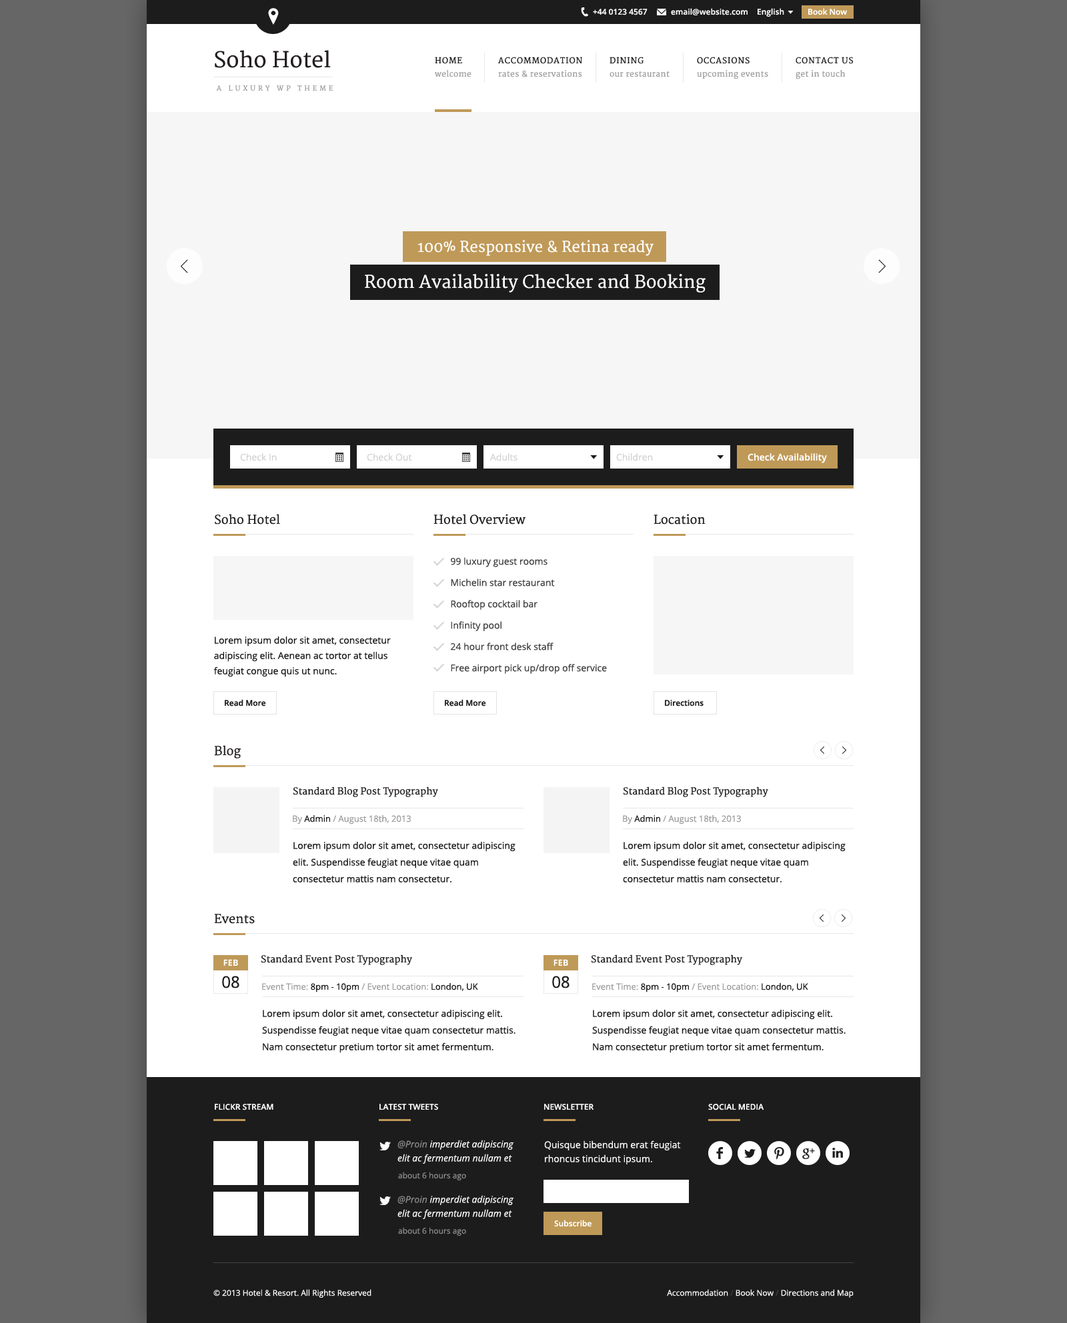
<style>
.page{position:relative;width:1067px;height:1323px;background:#ffffff}
.page>*{position:absolute;margin:0}
.t1{font:8px "OpenSans-Semibold";color:#ffffff}
.t2{font:21.3px "Merriweather";color:#231f20}
.t3{font:8px "Merriweather";letter-spacing:0.075em;color:#1c1c1c;text-transform:uppercase}
.t4{font:8px "Merriweather";letter-spacing:0.025em;color:#a09d9d}
.t5{font:6.7px "Merriweather";letter-spacing:0.4em;color:#a09d9d;text-transform:uppercase}
.t6{font:14.7px "Merriweather";color:#ffffff}
.t7{font:17.3px "Merriweather";color:#ffffff}
.t8{font:9.3px "OpenSans";color:#d3d3d3}
.t9{font:9.3px "OpenSans-Semibold";color:#ffffff}
.t10{font:12px "Merriweather";color:#231f20}
.t11{font:9.3px "OpenSans";color:#424242}
.t12{font:9.3px/15.3px "OpenSans";color:#1c1c1c}
.t13{font:8px "OpenSans-Semibold";color:#1c1c1c}
.t14{font:9.3px "Merriweather";color:#231f20}
.t15{font:8.7px "OpenSans";color:#a09d9d}
.t16{font:8.7px "OpenSans";color:#1c1c1c}
.t17{font:9.3px/16.7px "OpenSans";color:#1c1c1c}
.t18{font:8.7px "OpenSans-Bold";color:#ffffff;text-transform:uppercase}
.t19{font:16px "OpenSans";color:#1c1c1c}
.t20{font:8px "OpenSans-Semibold";color:#ffffff;text-transform:uppercase}
.t21{font:9.3px/14px "OpenSans-Italic";color:#ffffff}
.t22{font:9.3px/14px "OpenSans-Italic";color:#8b8b8b}
.t23{font:9.3px/14px "OpenSans";color:#ffffff}
.t24{font:8px "OpenSans";color:#8b8b8b}
.t25{font:8px "OpenSans";color:#ffffff}
.t26{font:8px "OpenSans";color:#424242}
</style>
<div class="page">
<p class="t1" style="left:593px;top:9px;width:54px;height:6px">+44 0123 4567</p>
<p class="t1" style="left:671px;top:8px;width:76px;height:7px">email@website.com</p>
<p class="t1" style="left:757px;top:8px;width:27px;height:9px">English</p>
<p class="t1" style="left:808px;top:8px;width:39px;height:7px">Book Now</p>
<p class="t2" style="left:215px;top:50px;width:116px;height:18px">Soho Hotel</p>
<p class="t3" style="left:435px;top:57px;width:27px;height:7px">Home</p>
<p class="t3" style="left:498px;top:57px;width:84px;height:7px">Accommodation</p>
<p class="t3" style="left:609px;top:57px;width:34px;height:7px">Dining</p>
<p class="t3" style="left:697px;top:57px;width:52px;height:7px">Occasions</p>
<p class="t3" style="left:795px;top:57px;width:58px;height:7px">Contact Us</p>
<p class="t4" style="left:435px;top:70px;width:36px;height:7px">welcome</p>
<p class="t4" style="left:498px;top:70px;width:84px;height:7px">rates &amp; reservations</p>
<p class="t4" style="left:609px;top:71px;width:60px;height:6px">our restaurant</p>
<p class="t4" style="left:697px;top:70px;width:71px;height:9px">upcoming events</p>
<p class="t4" style="left:795px;top:70px;width:50px;height:9px">get in touch</p>
<p class="t5" style="left:216px;top:85px;width:117px;height:6px">A Luxury WP Theme</p>
<p class="t6" style="left:418px;top:240px;width:235px;height:16px">100% Responsive &amp; Retina ready</p>
<p class="t7" style="left:365px;top:274px;width:340px;height:19px">Room Availability Checker and Booking</p>
<p class="t8" style="left:240px;top:453px;width:37px;height:8px">Check In</p>
<p class="t8" style="left:367px;top:453px;width:45px;height:8px">Check Out</p>
<p class="t8" style="left:489px;top:453px;width:28px;height:8px">Adults</p>
<p class="t8" style="left:616px;top:453px;width:37px;height:8px">Children</p>
<p class="t9" style="left:747px;top:453px;width:80px;height:10px">Check Availability</p>
<p class="t10" style="left:215px;top:514px;width:65px;height:11px">Soho Hotel</p>
<p class="t10" style="left:433px;top:514px;width:92px;height:11px">Hotel Overview</p>
<p class="t10" style="left:653px;top:514px;width:52px;height:11px">Location</p>
<p class="t11" style="left:451px;top:557px;width:96px;height:10px">99 luxury guest rooms</p>
<p class="t11" style="left:451px;top:579px;width:104px;height:8px">Michelin star restaurant</p>
<p class="t11" style="left:451px;top:600px;width:86px;height:10px">Rooftop cocktail bar</p>
<p class="t11" style="left:451px;top:621px;width:50px;height:10px">Infinity pool</p>
<p class="t12" style="left:213px;top:637px;width:178px;height:40px">Lorem ipsum dolor sit amet, consectetur adipiscing elit. Aenean ac tortor at tellus feugiat congue quis ut nunc.</p>
<p class="t11" style="left:451px;top:643px;width:102px;height:8px">24 hour front desk staff</p>
<p class="t11" style="left:451px;top:664px;width:156px;height:10px">Free airport pick up/drop off service</p>
<p class="t13" style="left:225px;top:699px;width:41px;height:8px">Read More</p>
<p class="t13" style="left:445px;top:699px;width:41px;height:8px">Read More</p>
<p class="t13" style="left:665px;top:700px;width:38px;height:7px">Directions</p>
<p class="t10" style="left:214px;top:745px;width:27px;height:14px">Blog</p>
<p class="t14" style="left:293px;top:787px;width:145px;height:10px">Standard Blog Post Typography</p>
<p class="t14" style="left:623px;top:787px;width:145px;height:10px">Standard Blog Post Typography</p>
<p class="t15" style="left:293px;top:815px;width:118px;height:10px">By <span class="t16">Admin</span> / August 18th, 2013</p>
<p class="t15" style="left:623px;top:815px;width:118px;height:10px">By <span class="t16">Admin</span> / August 18th, 2013</p>
<p class="t17" style="left:293px;top:842px;width:222px;height:41px">Lorem ipsum dolor sit amet, consectetur adipiscing elit. Suspendisse feugiat neque vitae quam consectetur mattis nam consectetur.</p>
<p class="t17" style="left:623px;top:842px;width:222px;height:41px">Lorem ipsum dolor sit amet, consectetur adipiscing elit. Suspendisse feugiat neque vitae quam consectetur mattis nam consectetur.</p>
<p class="t10" style="left:214px;top:914px;width:41px;height:10px">Events</p>
<p class="t18" style="left:223px;top:959px;width:15px;height:7px">Feb</p>
<p class="t14" style="left:261px;top:955px;width:151px;height:10px">Standard Event Post Typography</p>
<p class="t18" style="left:553px;top:959px;width:15px;height:7px">Feb</p>
<p class="t14" style="left:591px;top:955px;width:151px;height:10px">Standard Event Post Typography</p>
<p class="t19" style="left:222px;top:976px;width:17px;height:13px">08</p>
<p class="t19" style="left:552px;top:976px;width:17px;height:13px">08</p>
<p class="t15" style="left:262px;top:983px;width:216px;height:10px">Event Time: <span class="t16">8pm - 10pm</span> / Event Location: <span class="t16">London, UK</span></p>
<p class="t15" style="left:592px;top:983px;width:216px;height:10px">Event Time: <span class="t16">8pm - 10pm</span> / Event Location: <span class="t16">London, UK</span></p>
<p class="t17" style="left:262px;top:1010px;width:253px;height:43px">Lorem ipsum dolor sit amet, consectetur adipiscing elit. Suspendisse feugiat neque vitae quam consectetur mattis. Nam consectetur pretium tortor sit amet fermentum.</p>
<p class="t17" style="left:592px;top:1010px;width:253px;height:43px">Lorem ipsum dolor sit amet, consectetur adipiscing elit. Suspendisse feugiat neque vitae quam consectetur mattis. Nam consectetur pretium tortor sit amet fermentum.</p>
<p class="t20" style="left:215px;top:1104px;width:58px;height:7px">Flickr Stream</p>
<p class="t20" style="left:379px;top:1104px;width:59px;height:7px">Latest Tweets</p>
<p class="t20" style="left:544px;top:1104px;width:50px;height:7px">Newsletter</p>
<p class="t20" style="left:708px;top:1104px;width:56px;height:7px">Social Media</p>
<p class="t21" style="left:397px;top:1140px;width:117px;height:24px"><span class="t22">@Proin </span>imperdiet adipiscing elit ac fermentum nullam et</p>
<p class="t23" style="left:544px;top:1141px;width:137px;height:24px">Quisque bibendum erat feugiat rhoncus tincidunt ipsum.</p>
<p class="t24" style="left:398px;top:1172px;width:68px;height:9px">about 6 hours ago</p>
<p class="t21" style="left:397px;top:1195px;width:117px;height:24px"><span class="t22">@Proin</span> imperdiet adipiscing elit ac fermentum nullam et</p>
<p class="t24" style="left:398px;top:1227px;width:68px;height:9px">about 6 hours ago</p>
<p class="t1" style="left:554px;top:1220px;width:37px;height:7px">Subscribe</p>
<p class="t25" style="left:213px;top:1289px;width:158px;height:9px">© 2013 Hotel &amp; Resort. All Rights Reserved</p>
<p class="t25" style="left:667px;top:1289px;width:186px;height:9px">Accommodation <span class="t26">/</span> Book Now <span class="t26">/</span> Directions and Map</p>
</div>
